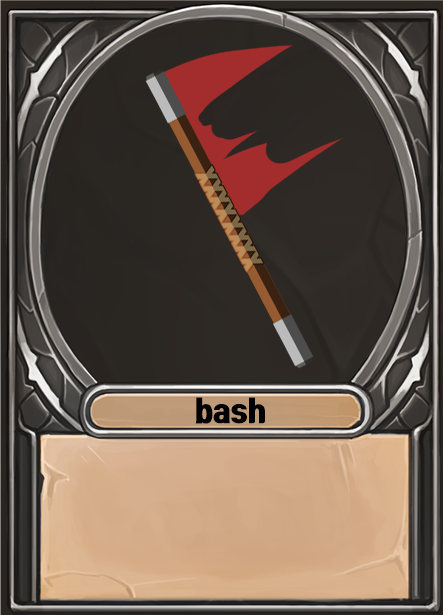
<style>
.page{position:relative;width:443px;height:615px}
.page>*{position:absolute;margin:0}
.t1{font:30px "TmonMonsoriBlack";color:#000000}
</style>
<div class="page">
<p class="t1" style="left:195px;top:397px;width:70px;height:27px">bash</p>
</div>
